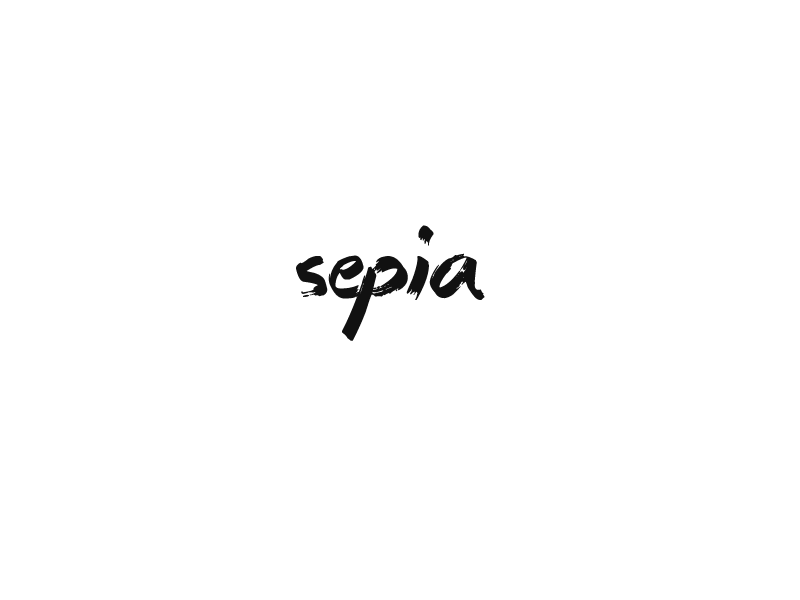
<style>
.page{position:relative;width:800px;height:600px;background:#ffffff}
.page>*{position:absolute;margin:0}
.t1{font:120px "StickyThings";color:#111111}
</style>
<div class="page">
<p class="t1" style="left:296px;top:225px;width:189px;height:116px">Sepia</p>
</div>
